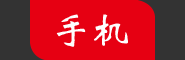
<style>
.page{position:relative;width:185px;height:60px;background:#e60012}
.page>*{position:absolute;margin:0}
.t1{font:40px "STXinwei";color:#fdfdfd}
</style>
<div class="page">
<p class="t1" style="left:56px;top:14px;width:72px;height:33px">手机</p>
</div>
